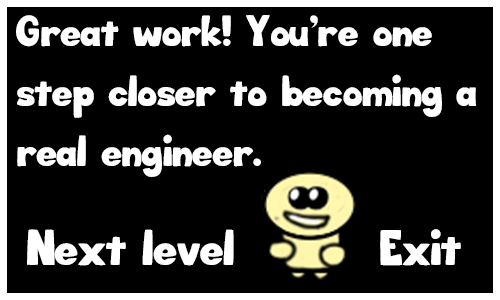
<style>
.page{position:relative;width:500px;height:300px;background:#000000}
.page>*{position:absolute;margin:0}
.t1{font:26px/60px "Big_Bottom_Cartoon";color:#ffffff}
.t2{font:30px "Big_Bottom_Cartoon";color:#ffffff}
.t3{font:29.8px "Big_Bottom_Cartoon";color:#ffffff}
</style>
<div class="page">
<p class="t1" style="left:16px;top:15px;width:460px;height:162px">Great work! You’re one step closer to becoming a real engineer.</p>
<p class="t2" style="left:27px;top:229px;width:207px;height:37px">Next level</p>
<p class="t3" style="left:380px;top:229px;width:81px;height:37px">Exit</p>
</div>
